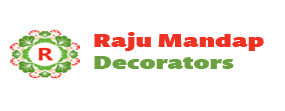
<style>
.page{position:relative;width:285px;height:111px;background:#ffffff}
.page>*{position:absolute;margin:0}
.t1{font:18.7px "MundoSansW04-Ultra";color:#ee3324;scale:1.41 1}
.t2{font:18.7px "MundoSansW04-Ultra";color:#6ba141;scale:1.41 1}
</style>
<div class="page">
<p class="t1" style="left:94px;top:32px;width:170px;height:37px">Raju Mandap <span class="t2">Decorators</span></p>
</div>
